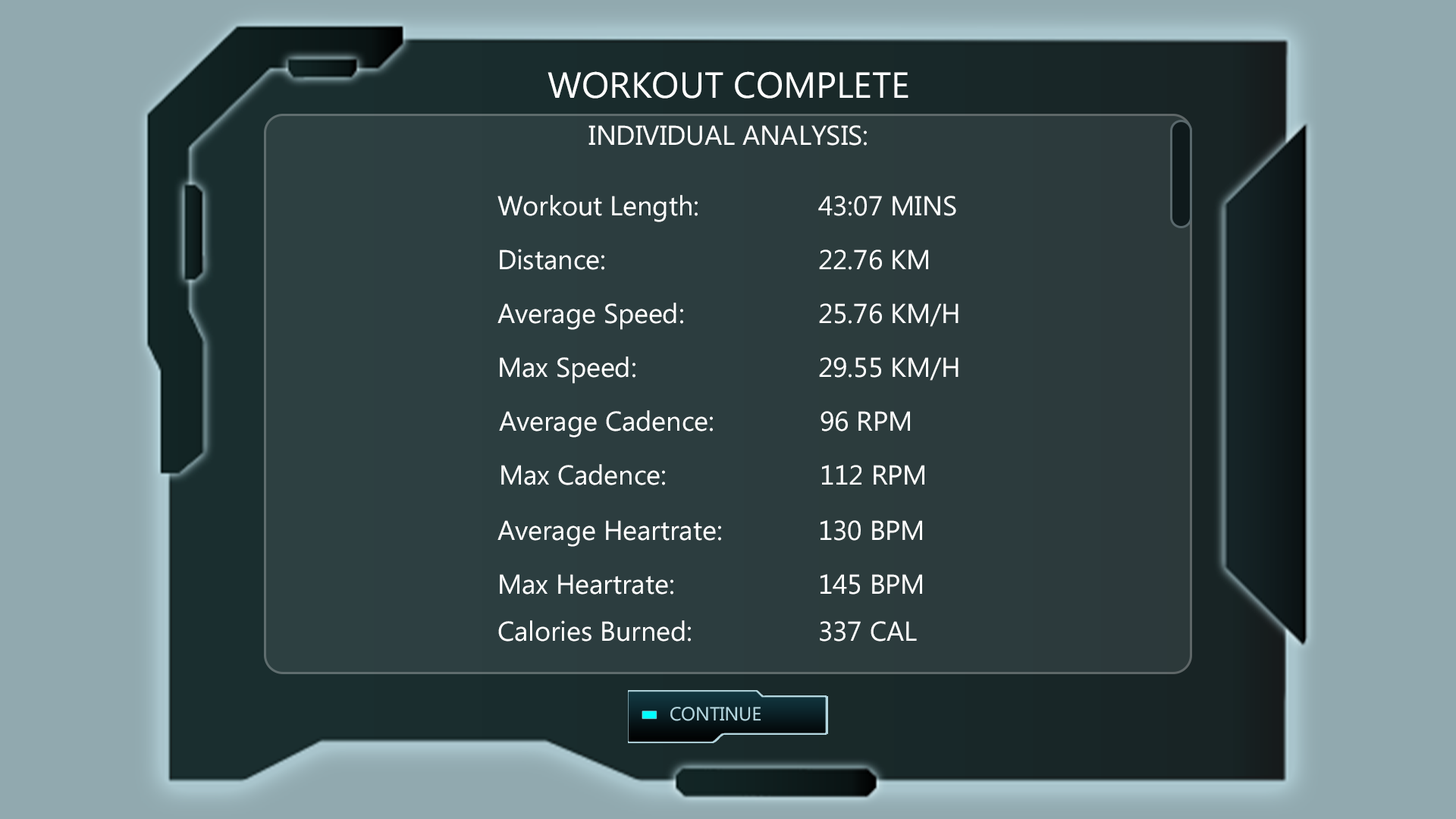
<style>
.page{position:relative;width:1456px;height:819px;background:#91a9af}
.page>*{position:absolute;margin:0}
.t1{font:36.4px "MicrosoftPhagsPa";color:#ffffff}
.t2{font:27.3px "MicrosoftPhagsPa";color:#ffffff}
</style>
<div class="page">
<p class="t1" style="left:548px;top:71px;width:360px;height:28px">WORKOUT COMPLETE</p>
<p class="t2" style="left:588px;top:125px;width:279px;height:21px">INDIVIDUAL ANALYSIS:</p>
<p class="t2" style="left:497px;top:195px;width:201px;height:27px">Workout Length:</p>
<p class="t2" style="left:818px;top:196px;width:138px;height:20px">43:07 MINS</p>
<p class="t2" style="left:500px;top:249px;width:104px;height:21px">Distance:</p>
<p class="t2" style="left:819px;top:249px;width:109px;height:21px">22.76 KM</p>
<p class="t2" style="left:497px;top:303px;width:186px;height:27px">Average Speed:</p>
<p class="t2" style="left:819px;top:303px;width:140px;height:24px">25.76 KM/H</p>
<p class="t2" style="left:500px;top:356px;width:135px;height:28px">Max Speed:</p>
<p class="t2" style="left:819px;top:357px;width:140px;height:24px">29.55 KM/H</p>
<p class="t2" style="left:499px;top:410px;width:214px;height:28px">Average Cadence:</p>
<p class="t2" style="left:821px;top:411px;width:89px;height:20px">96 RPM</p>
<p class="t2" style="left:501px;top:464px;width:164px;height:21px">Max Cadence:</p>
<p class="t2" style="left:822px;top:465px;width:102px;height:20px">112 RPM</p>
<p class="t2" style="left:497px;top:520px;width:224px;height:27px">Average Heartrate:</p>
<p class="t2" style="left:821px;top:520px;width:101px;height:21px">130 BPM</p>
<p class="t2" style="left:500px;top:574px;width:173px;height:21px">Max Heartrate:</p>
<p class="t2" style="left:821px;top:574px;width:101px;height:21px">145 BPM</p>
<p class="t2" style="left:498px;top:620px;width:193px;height:22px">Calories Burned:</p>
<p class="t2" style="left:820px;top:621px;width:97px;height:21px">337 CAL</p>
</div>
